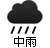
<style>
.page{position:relative;width:50px;height:48px;background:#ffffff}
.page>*{position:absolute;margin:0}
.t1{font:12px "OPPOSans-R";color:#000000}
</style>
<div class="page">
<p class="t1" style="left:14px;top:36px;width:22px;height:11px">中雨</p>
</div>
